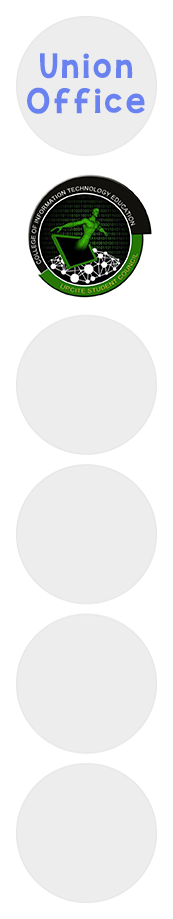
<style>
.page{position:relative;width:173px;height:919px;background:#ededed}
.page>*{position:absolute;margin:0}
.t1{font:29px "KGBlankSpaceSolid";letter-spacing:0.1em;color:#6982ef}
</style>
<div class="page">
<p class="t1" style="left:27px;top:53px;width:118px;height:61px;text-align:center">Union<br>Office</p>
</div>
